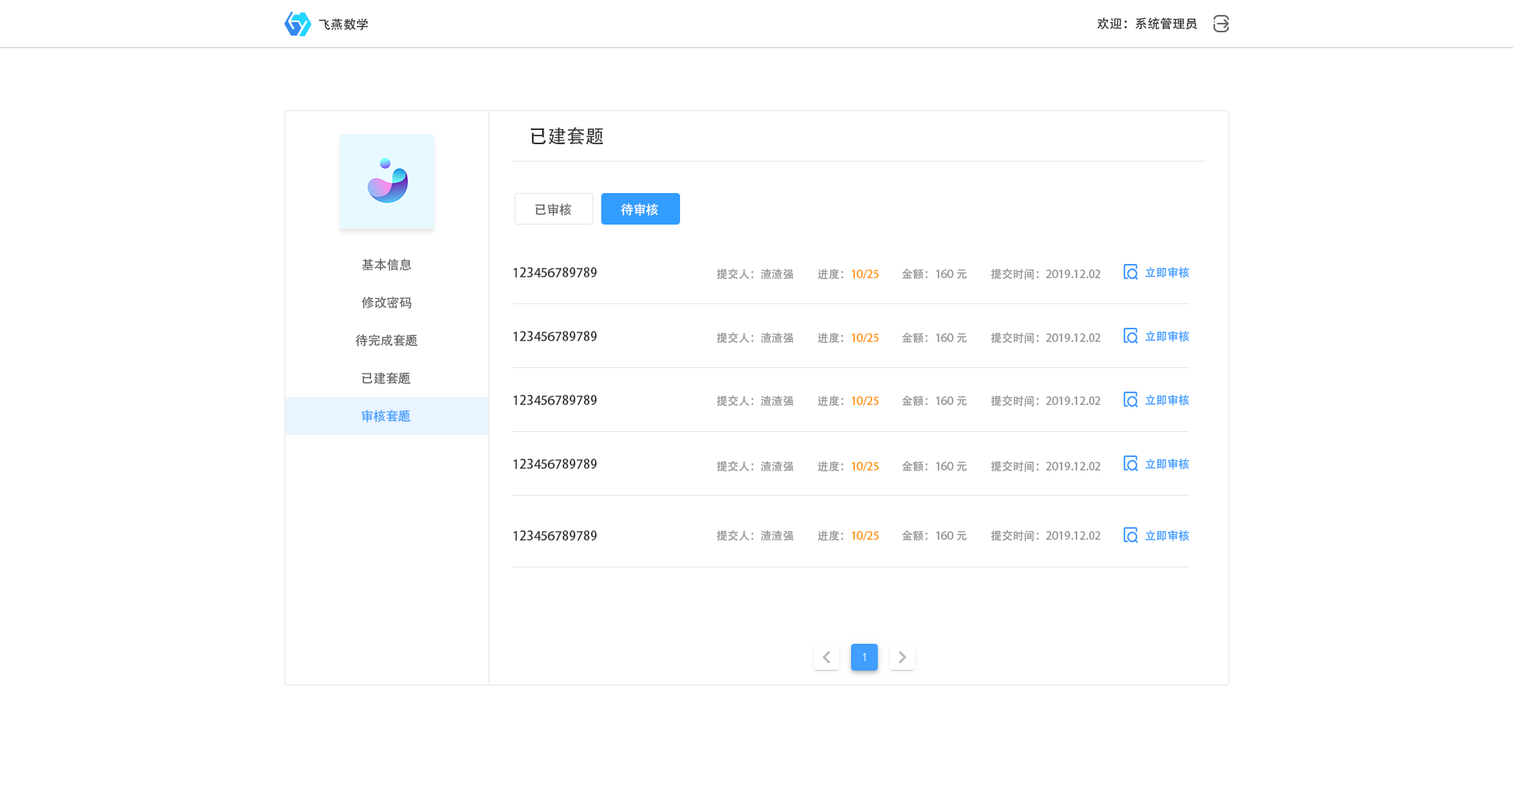
<style>
.page{position:relative;width:1513px;height:788px;background:#ffffff}
.page>*{position:absolute;margin:0}
.t1{font:12.6px "AdobeHeitiStd-Regular";color:#333333}
.t2{font:18.9px "AdobeHeitiStd-Regular";color:#333333}
.t3{font:12.6px "AdobeHeitiStd-Regular";color:#666666}
.t4{font:12.6px "AdobeHeitiStd-Regular";color:#ffffff}
.t5{font:11px "AdobeHeitiStd-Regular";color:#999999}
.t6{font:11px "AdobeHeitiStd-Regular";color:#ff9814}
.t7{font:11px "AdobeHeitiStd-Regular";color:#409eff}
.t8{font:12.6px "AdobeHeitiStd-Regular";color:#409eff}
</style>
<div class="page">
<p class="t1" style="left:1097px;top:17px;width:101px;height:13px">欢迎：系统管理员</p>
<p class="t1" style="left:318px;top:18px;width:50px;height:13px">飞燕数学</p>
<p class="t2" style="left:530px;top:127px;width:74px;height:18px">已建套题</p>
<p class="t3" style="left:535px;top:203px;width:36px;height:13px">已审核</p>
<p class="t4" style="left:621px;top:203px;width:37px;height:13px">待审核</p>
<p class="t3" style="left:362px;top:258px;width:50px;height:13px">基本信息</p>
<p class="t1" style="left:513px;top:267px;width:84px;height:10px">123456789789</p>
<p class="t5" style="left:716px;top:268px;width:78px;height:12px">提交人：渣渣强</p>
<p class="t6" style="left:818px;top:269px;width:61px;height:11px"><span class="t5">进度：</span>10/25</p>
<p class="t5" style="left:902px;top:269px;width:65px;height:10px">金额：160元</p>
<p class="t5" style="left:991px;top:268px;width:110px;height:12px">提交时间：2019.12.02</p>
<p class="t7" style="left:1145px;top:267px;width:44px;height:11px">立即审核</p>
<p class="t3" style="left:362px;top:296px;width:49px;height:13px">修改密码</p>
<p class="t3" style="left:355px;top:334px;width:63px;height:13px">待完成套题</p>
<p class="t1" style="left:513px;top:331px;width:84px;height:10px">123456789789</p>
<p class="t5" style="left:716px;top:332px;width:78px;height:12px">提交人：渣渣强</p>
<p class="t6" style="left:818px;top:333px;width:61px;height:11px"><span class="t5">进度：</span>10/25</p>
<p class="t5" style="left:902px;top:333px;width:65px;height:10px">金额：160元</p>
<p class="t5" style="left:991px;top:332px;width:110px;height:12px">提交时间：2019.12.02</p>
<p class="t7" style="left:1145px;top:331px;width:44px;height:11px">立即审核</p>
<p class="t3" style="left:362px;top:372px;width:49px;height:13px">已建套题</p>
<p class="t1" style="left:513px;top:395px;width:84px;height:10px">123456789789</p>
<p class="t5" style="left:716px;top:395px;width:78px;height:12px">提交人：渣渣强</p>
<p class="t6" style="left:818px;top:396px;width:61px;height:11px"><span class="t5">进度：</span>10/25</p>
<p class="t5" style="left:902px;top:396px;width:65px;height:10px">金额：160元</p>
<p class="t5" style="left:991px;top:395px;width:110px;height:12px">提交时间：2019.12.02</p>
<p class="t7" style="left:1145px;top:395px;width:44px;height:11px">立即审核</p>
<p class="t8" style="left:362px;top:410px;width:49px;height:12px">审核套题</p>
<p class="t1" style="left:513px;top:459px;width:84px;height:10px">123456789789</p>
<p class="t5" style="left:716px;top:460px;width:78px;height:12px">提交人：渣渣强</p>
<p class="t6" style="left:818px;top:461px;width:61px;height:11px"><span class="t5">进度：</span>10/25</p>
<p class="t5" style="left:902px;top:461px;width:65px;height:10px">金额：160元</p>
<p class="t5" style="left:991px;top:460px;width:110px;height:12px">提交时间：2019.12.02</p>
<p class="t7" style="left:1145px;top:459px;width:44px;height:11px">立即审核</p>
<p class="t1" style="left:513px;top:530px;width:84px;height:11px">123456789789</p>
<p class="t5" style="left:716px;top:530px;width:78px;height:11px">提交人：渣渣强</p>
<p class="t6" style="left:818px;top:530px;width:61px;height:11px"><span class="t5">进度：</span>10/25</p>
<p class="t5" style="left:902px;top:530px;width:65px;height:11px">金额：160元</p>
<p class="t5" style="left:991px;top:530px;width:110px;height:11px">提交时间：2019.12.02</p>
<p class="t7" style="left:1145px;top:530px;width:44px;height:11px">立即审核</p>
</div>
